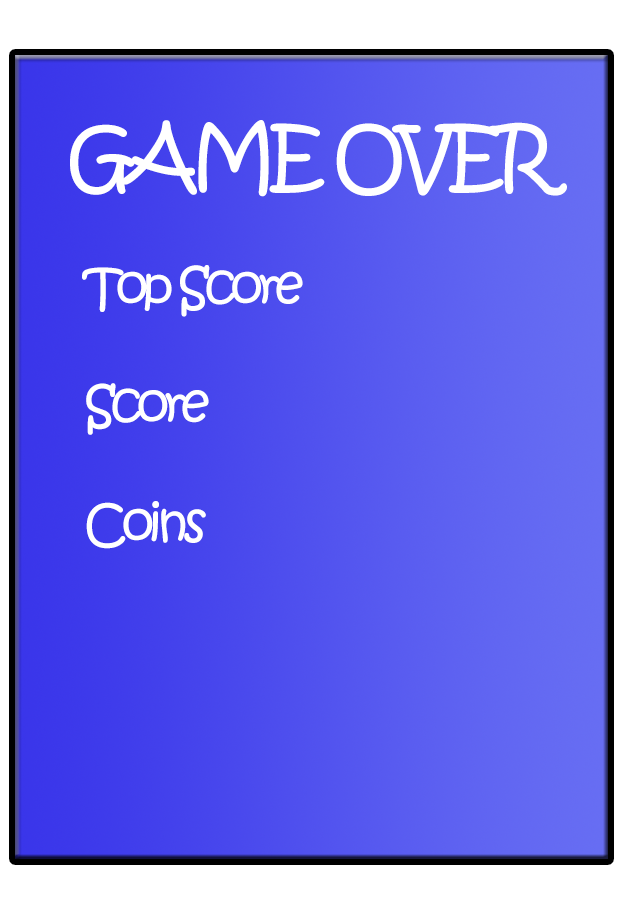
<style>
.page{position:relative;width:624px;height:907px}
.page>*{position:absolute;margin:0}
.t1{font:137.7px "KristenITC-Regular";letter-spacing:-0.1em;color:#ffffff}
.t2{font:91.8px "ErasITC-Bold";letter-spacing:-0.1em;color:#ffffff}
.t3{font:88.1px "KristenITC-Regular";letter-spacing:-0.1em;color:#ffffff}
</style>
<div class="page">
<p class="t1" style="left:70px;top:120px;width:497px;height:77px"><span class="t2"><br><br><br><br><br><br><br><br><br></span><br>GAME OVER</p>
<p class="t3" style="left:82px;top:265px;width:221px;height:52px">Top Score</p>
<p class="t3" style="left:86px;top:383px;width:123px;height:52px">Score</p>
<p class="t3" style="left:86px;top:501px;width:120px;height:48px">Coins</p>
</div>
